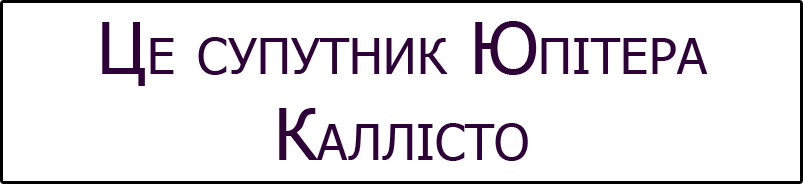
<style>
.page{position:relative;width:803px;height:184px;background:#ffffff}
.page>*{position:absolute;margin:0}
.t1{font:72px "Tahoma";color:#2e0239;font-variant:small-caps}
</style>
<div class="page">
<p class="t1" style="left:102px;top:21px;width:606px;height:140px;text-align:center">Це супутник Юпітера<br>Каллісто</p>
</div>
